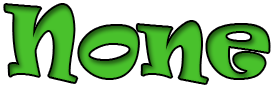
<style>
.page{position:relative;width:280px;height:86px;background:#ffffff}
.page>*{position:absolute;margin:0}
.t1{font:86.8px "Ravie";color:#49c12c}
</style>
<div class="page">
<p class="t1" style="left:5px;top:5px;width:264px;height:78px">None</p>
</div>
